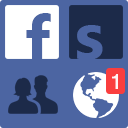
<style>
.page{position:relative;width:128px;height:128px;background:#4c65a2}
.page>*{position:absolute;margin:0}
.t1{font:66px "SegoeUI-Bold";letter-spacing:-0.01em;color:#4c65a2}
.t2{font:20px "HelveticaNeueLT-Medium";letter-spacing:-0.01em;color:#ffffff}
</style>
<div class="page">
<p class="t1" style="left:26px;top:13px;width:25px;height:50px">f</p>
<p class="t1" style="left:77px;top:25px;width:26px;height:35px">s</p>
<p class="t2" style="left:112px;top:74px;width:6px;height:15px;opacity:0.94">1</p>
</div>
